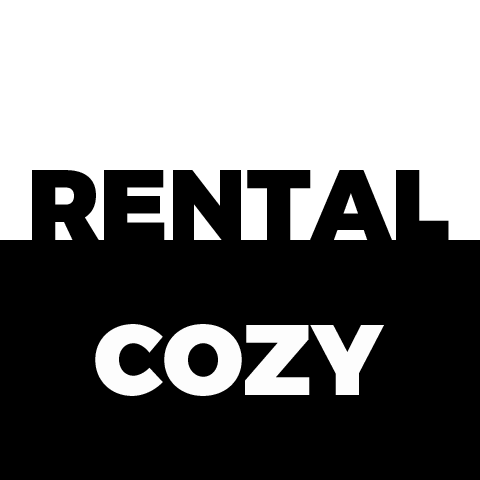
<style>
.page{position:relative;width:480px;height:480px;background:#000000}
.page>*{position:absolute;margin:0}
.t1{font:100px "Montserrat-Black";color:#000000}
.t2{font:100px "Montserrat-Black";color:#fefefe}
.t3{font:83.3px "Montserrat-Black";color:#000000}
</style>
<div class="page">
<p class="t1" style="left:32px;top:170px;width:417px;height:70px">RENTAL</p>
<p class="t2" style="left:95px;top:324px;width:289px;height:72px"><span class="t3"> <br></span>COZY</p>
</div>
